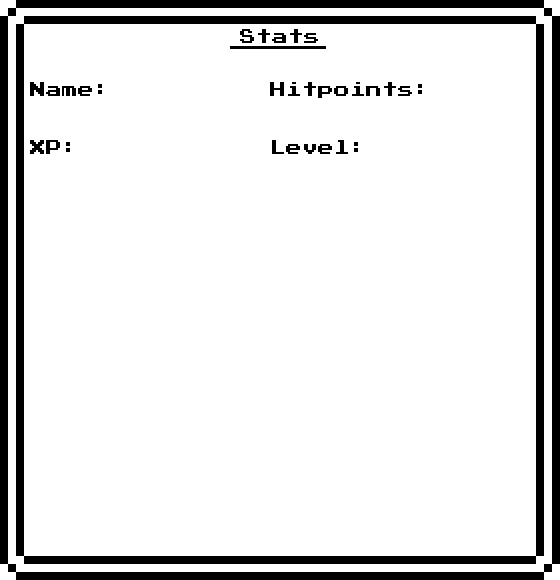
<style>
.page{position:relative;width:560px;height:580px;background:#ffffff}
.page>*{position:absolute;margin:0}
.t1{font:16px "PressStart2P";color:#000000}
</style>
<div class="page">
<p class="t1" style="left:240px;top:29px;width:78px;height:14px">Stats</p>
<p class="t1" style="left:30px;top:82px;width:392px;height:72px">Name:          Hitpoints:<br><br><br>XP:            Level:</p>
</div>
